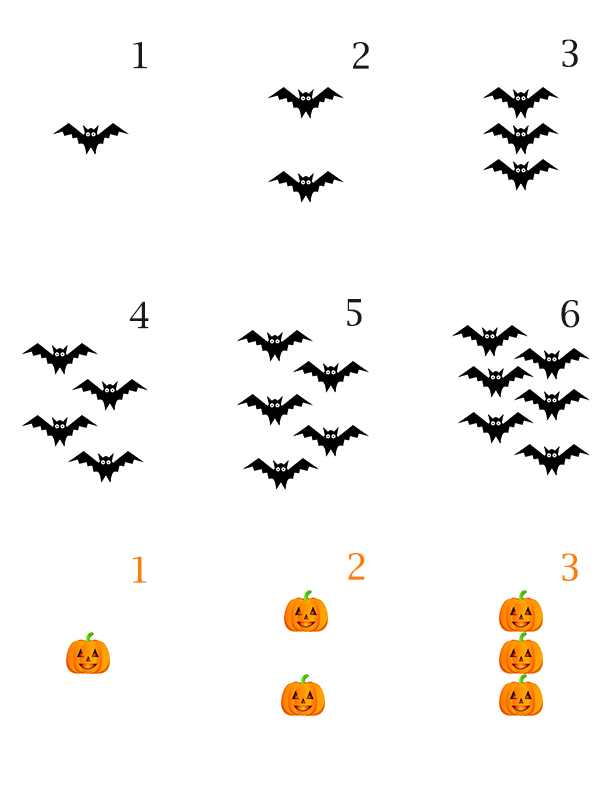
<style>
.page{position:relative;width:612px;height:792px;background:#ffffff}
.page>*{position:absolute;margin:0}
.t1{font:36px "LucidaBright";color:#191919}
.t2{font:36px "LucidaBright";color:#ff7d00}
</style>
<div class="page">
<p class="t1" style="left:562px;top:39px;width:16px;height:28px">3</p>
<p class="t1" style="left:133px;top:42px;width:14px;height:27px">1</p>
<p class="t1" style="left:353px;top:42px;width:16px;height:27px">2</p>
<p class="t1" style="left:129px;top:301px;width:20px;height:28px">4</p>
<p class="t1" style="left:347px;top:299px;width:15px;height:27px">5</p>
<p class="t1" style="left:561px;top:300px;width:19px;height:28px">6</p>
<p class="t2" style="left:133px;top:556px;width:14px;height:27px">1</p>
<p class="t2" style="left:348px;top:553px;width:17px;height:27px">2</p>
<p class="t2" style="left:562px;top:553px;width:16px;height:28px">3</p>
</div>
